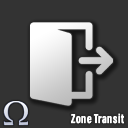
<style>
.page{position:relative;width:128px;height:128px;background:#333333}
.page>*{position:absolute;margin:0}
.t1{font:13px "AcuminConcept-ExtraCondensedBold";letter-spacing:0.04em;color:#ffffff}
</style>
<div class="page">
<p class="t1" style="left:71px;top:113px;width:53px;height:11px">Zone Transit</p>
</div>
